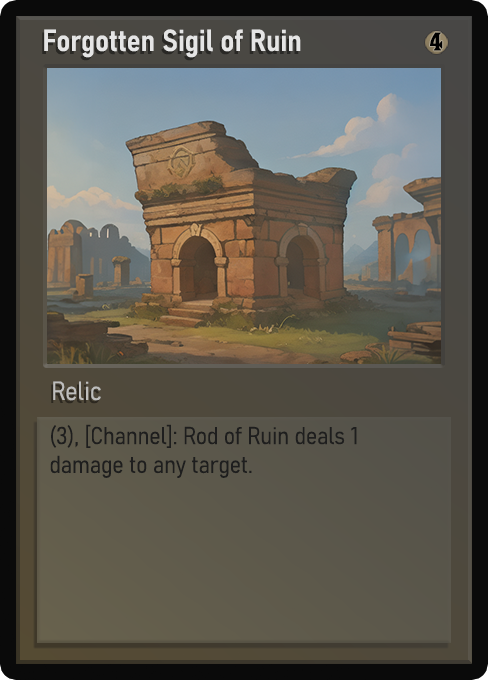
<style>
.page{position:relative;width:488px;height:680px}
.page>*{position:absolute;margin:0}
.t1{font:30px "Bahnschrift-SemiBoldSemiCondensed";color:#f2f2f2;font-weight:bold}
.t2{font:25px "WTRRoycroft";color:#000000;font-weight:bold;scale:1.09 1}
.t3{font:26px "Bahnschrift-LightSemiCondensed";color:#c8c8c8;font-weight:bold}
.t4{font:24px "Bahnschrift-LightSemiCondensed";color:#1e1e1e;font-weight:bold}
</style>
<div class="page">
<p class="t1" style="left:44px;top:29px;width:257px;height:29px;opacity:0.9">Forgotten Sigil of Ruin</p>
<p class="t2" style="left:430px;top:32px;width:13px;height:19px">4</p>
<p class="t3" style="left:53px;top:381px;width:48px;height:20px;opacity:0.9">Relic</p>
<p class="t4" style="left:50px;top:424px;width:307px;height:54px">(3), [Channel]: Rod of Ruin deals 1 damage to any target.</p>
</div>
